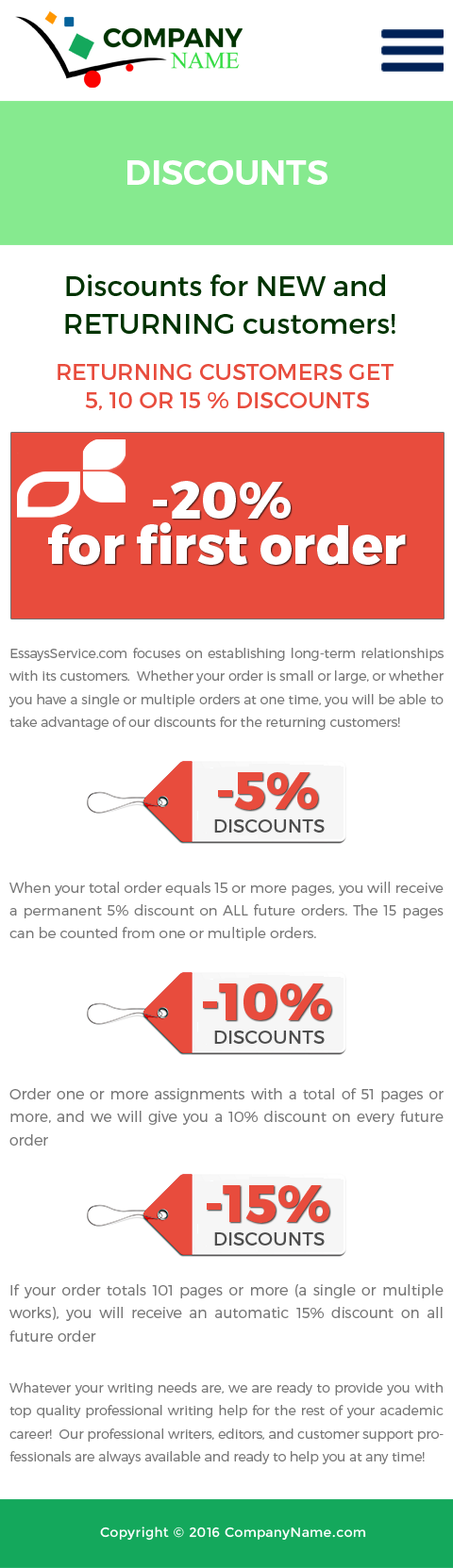
<style>
.page{position:relative;width:453px;height:1568px;background:#ffffff}
.page>*{position:absolute;margin:0}
.t1{font:33.9px "Montserrat-SemiBold";color:#ffffff;text-transform:uppercase}
.t2{font:28.3px/37.7px "Montserrat-Regular";color:#003300}
.t3{font:22.6px/28.3px "Montserrat-Regular";color:#e84c3d}
.t4{font:51.9px/45.3px "Montserrat-ExtraBold";color:#ffffff}
.t5{font:13.2px/23px "Montserrat-Light";color:#777777}
.t6{font:51.9px "Montserrat-ExtraBold";color:#e84c3d}
.t7{font:18.9px "Montserrat-Regular";color:#4e4e4e;text-transform:uppercase}
.t8{font:14.1px/23px "Montserrat-Light";color:#777777}
.t9{font:14.7px/23px "Montserrat-Light";color:#777777}
.t10{font:13.2px "Montserrat-Regular";letter-spacing:0.025em;color:#ffffff}
</style>
<div class="page">
<p class="t1" style="left:127px;top:160px;width:200px;height:25px">Discounts</p>
<p class="t2" style="left:65px;top:274px;width:330px;height:60px;text-align:center">Discounts for NEW and <br>RETURNING customers!</p>
<p class="t3" style="left:58px;top:364px;width:335px;height:46px;text-align:center">RETURNING CUSTOMERS GET<br> 5, 10 OR 15 % DISCOUNTS</p>
<p class="t4" style="left:48px;top:481px;width:357px;height:84px;text-align:center">-20% <br>for first order</p>
<p class="t5" style="left:8px;top:648px;width:435px;height:82px;text-align:justify">EssaysService.com focuses on establishing long-term relationships with its customers.  Whether your order is small or large, or whether you have a single or multiple orders at one time, you will be able to take advantage of our discounts for the returning customers!</p>
<p class="t6" style="left:218px;top:772px;width:100px;height:38px">-5%</p>
<p class="t7" style="left:214px;top:819px;width:110px;height:14px">Discounts</p>
<p class="t8" style="left:9px;top:882px;width:434px;height:59px;text-align:justify">When your total order equals 15 or more pages, you will receive a permanent 5% discount on ALL future orders. The 15 pages can be counted from one or multiple orders.</p>
<p class="t6" style="left:203px;top:983px;width:128px;height:37px">-10%</p>
<p class="t7" style="left:214px;top:1031px;width:110px;height:13px">Discounts</p>
<p class="t9" style="left:9px;top:1088px;width:434px;height:58px;text-align:justify">Order one or more assignments with a total of 51 pages or more, and we will give you a 10% discount on every future order</p>
<p class="t6" style="left:206px;top:1185px;width:123px;height:38px">-15%</p>
<p class="t7" style="left:214px;top:1232px;width:110px;height:14px">Discounts</p>
<p class="t9" style="left:9px;top:1284px;width:434px;height:58px;text-align:justify">If your order totals 101 pages or more (a single or multiple works), you will receive an automatic 15% discount on all future order</p>
<p class="t5" style="left:9px;top:1382px;width:434px;height:82px;text-align:justify">Whatever your writing needs are, we are ready to provide you with top quality professional writing help for the rest of your academic career!  Our professional writers, editors, and customer support professionals are always available and ready to help you at any time!</p>
<p class="t10" style="left:100px;top:1527px;width:266px;height:14px">Copyright © 2016 CompanyName.com</p>
</div>
